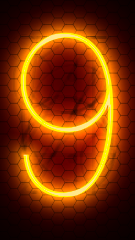
<style>
.page{position:relative;width:135px;height:240px}
.page>*{position:absolute;margin:0}
.t1{font:220px "Inter-Thin"}
.t2{font:220px "Inter-Thin";color:#480000}
</style>
<div class="page">
<p class="t1" style="left:17px;top:32px;width:100px;height:166px">0</p>
<p class="t1" style="left:20px;top:32px;width:94px;height:166px">9</p>
<p class="t1" style="left:20px;top:32px;width:96px;height:166px">3</p>
<p class="t1" style="left:20px;top:32px;width:94px;height:166px">9</p>
<p class="t2" style="left:66px;top:71px;width:12px;height:94px">:</p>
</div>
